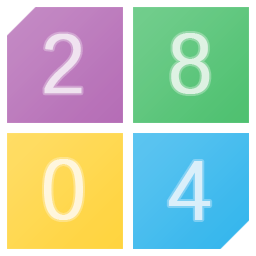
<style>
.page{position:relative;width:256px;height:256px}
.page>*{position:absolute;margin:0}
.t1{font:84px "DengXian-Regular";letter-spacing:0.05em;color:#f0e3f0;font-weight:bold}
.t2{font:84px "DengXian-Regular";letter-spacing:0.05em;color:#def2e3;font-weight:bold}
.t3{font:84px "DengXian-Regular";letter-spacing:0.05em;color:#fff6dc;font-weight:bold}
.t4{font:84px "DengXian-Regular";letter-spacing:0.05em;color:#daeffa;font-weight:bold}
</style>
<div class="page">
<p class="t1" style="left:44px;top:33px;width:38px;height:61px">2</p>
<p class="t2" style="left:171px;top:33px;width:39px;height:61px">8</p>
<p class="t3" style="left:44px;top:159px;width:39px;height:61px">0</p>
<p class="t4" style="left:168px;top:161px;width:43px;height:59px">4</p>
</div>
